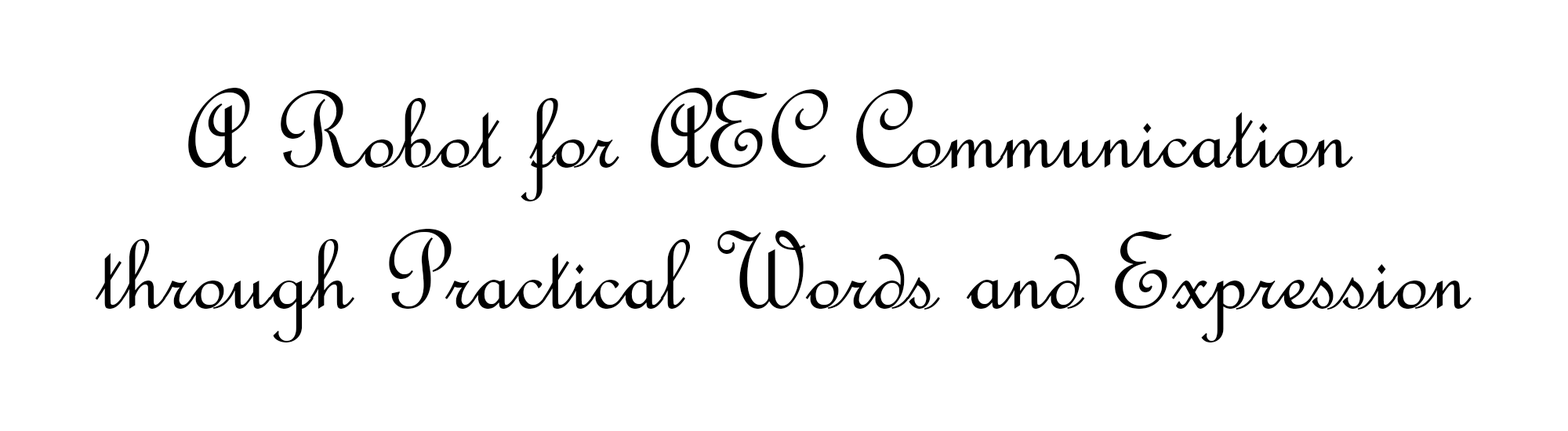
<style>
.page{position:relative;width:1568px;height:431px;background:#ffffff}
.page>*{position:absolute;margin:0}
.t1{font:117.6px "FrenchScriptMT";color:#000000}
</style>
<div class="page">
<p class="t1" style="left:95px;top:88px;width:1377px;height:255px;text-align:center">A Robot for AEC Communication <br>through Practical Words and Expression</p>
</div>
